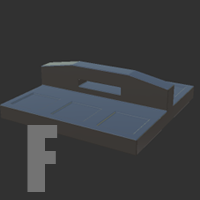
<style>
.page{position:relative;width:200px;height:200px;background:#313131}
.page>*{position:absolute;margin:0}
.t1{font:85.1px "Impact";color:#737373}
</style>
<div class="page">
<p class="t1" style="left:27px;top:125px;width:31px;height:67px">F</p>
</div>
